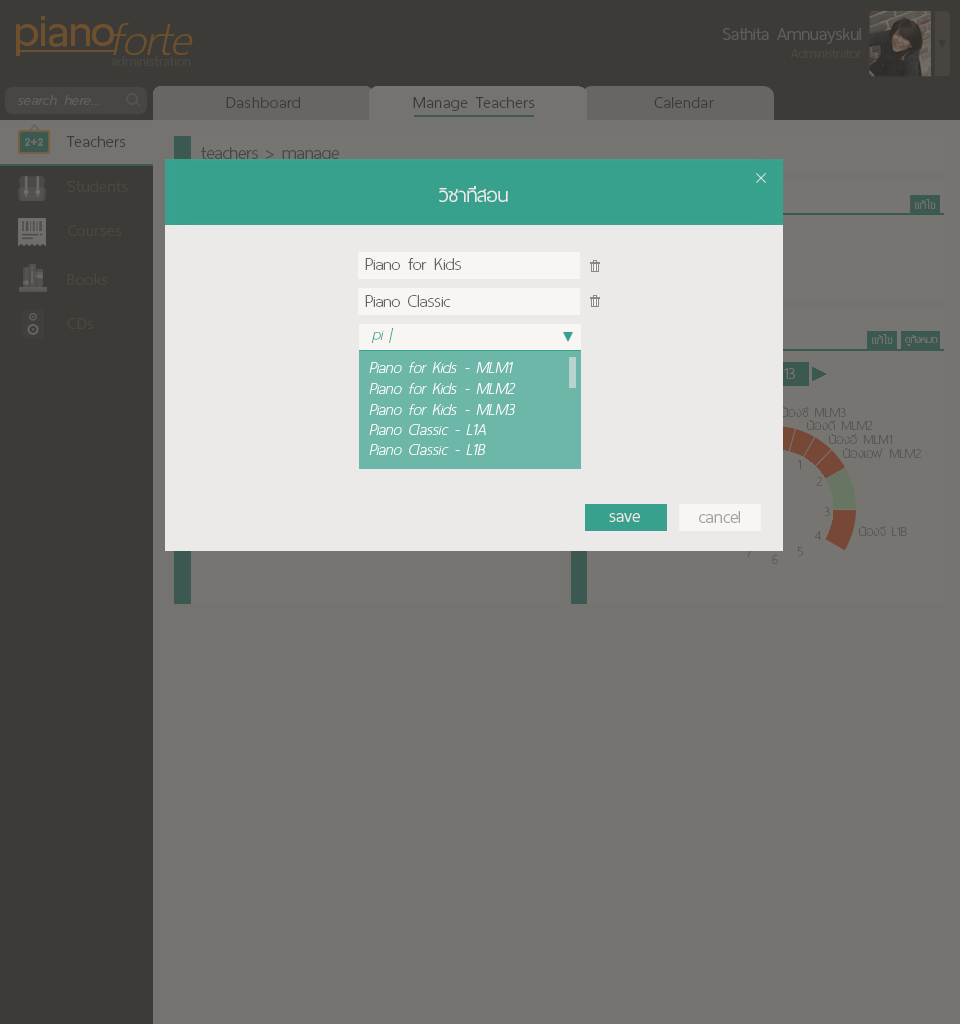
<style>
.page{position:relative;width:960px;height:1024px;background:#75736f}
.page>*{position:absolute;margin:0}
.t1{font:60px "ThaiSansNeue-SemiBold";letter-spacing:-0.005em;color:#6e502c}
.t2{font:62px "ThaiSansNeue-ExtraLightItalic";letter-spacing:-0.005em;color:#6e502c}
.t3{font:24px "ThaiSansNeue-Light";letter-spacing:-0.005em;color:#5f5d5a}
.t4{font:18px "ThaiSansNeue-Light";letter-spacing:-0.005em;color:#4a4843}
.t5{font:18.5px "ThaiSansNeue-ExtraLight";letter-spacing:0.025em;color:#4a4843}
.t6{font:20px "ThaiSansNeue-LightItalic";letter-spacing:0.025em;color:#605e5a}
.t7{font:22px "ThaiSansNeue-Light";letter-spacing:0.025em;color:#3d3b37}
.t8{font:24px "ThaiSansNeue-Light";letter-spacing:-0.005em;color:#484744}
.t9{font:22px "ThaiSansNeue-Light";letter-spacing:0.025em;color:#4a4843}
.t10{font:26px "ThaiSansNeue-Light";letter-spacing:-0.005em;color:#ebeae8}
.t11{font:16px "ThaiSansNeue-UltraLight";color:#777572}
.t12{font:24px "ThaiSansNeue-UltraLight";color:#636363}
.t13{font:22px "ThaiSansNeue-UltraLightItalic";color:#37a18e}
.t14{font:14px "ThaiSansNeue-UltraLight";color:#777572}
.t15{font:22px "ThaiSansNeue-UltraLightItalic";color:#ffffff}
.t16{font:18px "ThaiSansNeue-UltraLight";letter-spacing:0.01em;color:#5a5855}
.t17{font:24px "ThaiSansNeue-Light";letter-spacing:-0.005em;color:#ebeae8}
.t18{font:24px "ThaiSansNeue-Light";color:#a2a1a0}
.t19{font:18px "ThaiSansNeue-UltraLight";color:#5a5855}
.t20{font:18px "ThaiSansNeue-UltraLight";letter-spacing:0.01em}
</style>
<div class="page">
<p class="t1" style="left:16px;top:16px;width:98px;height:40px">piano</p>
<p class="t2" style="left:113px;top:23px;width:80px;height:32px">forte</p>
<p class="t3" style="left:723px;top:28px;width:138px;height:16px">Sathita Amnuayskul</p>
<p class="t4" style="left:791px;top:49px;width:71px;height:9px">Administrator</p>
<p class="t5" style="left:111px;top:56px;width:80px;height:10px">administration</p>
<p class="t6" style="left:17px;top:95px;width:83px;height:10px">search here...</p>
<p class="t7" style="left:226px;top:97px;width:74px;height:11px">Dashboard</p>
<p class="t7" style="left:413px;top:97px;width:122px;height:14px">Manage Teachers</p>
<p class="t7" style="left:654px;top:97px;width:60px;height:11px">Calendar</p>
<p class="t7" style="left:66px;top:136px;width:60px;height:11px">Teachers</p>
<p class="t8" style="left:201px;top:147px;width:138px;height:16px">teachers &gt; manage</p>
<p class="t9" style="left:67px;top:181px;width:61px;height:11px">Students</p>
<p class="t10" style="left:439px;top:186px;width:69px;height:16px">วิชาที่สอน</p>
<p class="t11" style="left:915px;top:199px;width:21px;height:10px">แก้ไข</p>
<p class="t9" style="left:68px;top:225px;width:54px;height:11px">Courses</p>
<p class="t12" style="left:365px;top:258px;width:96px;height:12px">Piano for Kids</p>
<p class="t9" style="left:67px;top:274px;width:41px;height:11px">Books</p>
<p class="t12" style="left:365px;top:295px;width:86px;height:12px">Piano Classic</p>
<p class="t9" style="left:67px;top:318px;width:27px;height:11px">CDs</p>
<p class="t13" style="left:372px;top:328px;width:22px;height:15px">pi |</p>
<p class="t11" style="left:872px;top:334px;width:21px;height:10px">แก้ไข</p>
<p class="t14" style="left:905px;top:335px;width:33px;height:11px">ดูทั้งหมด</p>
<p class="t15" style="left:369px;top:362px;width:144px;height:11px">Piano for Kids - MLM1</p>
<p class="t15" style="left:369px;top:383px;width:147px;height:11px">Piano for Kids - MLM2</p>
<p class="t15" style="left:369px;top:404px;width:146px;height:11px">Piano for Kids - MLM3</p>
<p class="t16" style="left:781px;top:407px;width:65px;height:10px">น้องซี MLM3</p>
<p class="t15" style="left:369px;top:424px;width:117px;height:11px">Piano Classic - L1A</p>
<p class="t16" style="left:807px;top:420px;width:66px;height:10px">น้องดี MLM2</p>
<p class="t16" style="left:829px;top:434px;width:64px;height:10px">น้องอี MLM1</p>
<p class="t15" style="left:369px;top:444px;width:117px;height:11px">Piano Classic - L1B</p>
<p class="t16" style="left:843px;top:448px;width:79px;height:10px">น้องเอฟ MLM2</p>
<p class="t16" style="left:797px;top:460px;width:4px;height:9px">1</p>
<p class="t16" style="left:816px;top:477px;width:7px;height:9px">2</p>
<p class="t16" style="left:824px;top:507px;width:6px;height:9px">3</p>
<p class="t17" style="left:609px;top:513px;width:31px;height:9px">save</p>
<p class="t18" style="left:699px;top:511px;width:41px;height:12px">cancel</p>
<p class="t16" style="left:814px;top:531px;width:7px;height:9px">4</p>
<p class="t19" style="left:859px;top:526px;width:48px;height:10px">น้องจี L1B</p>
<p class="t20" style="left:772px;top:555px;width:6px;height:9px">6</p>
<p class="t16" style="left:798px;top:547px;width:6px;height:9px">5</p>
</div>
